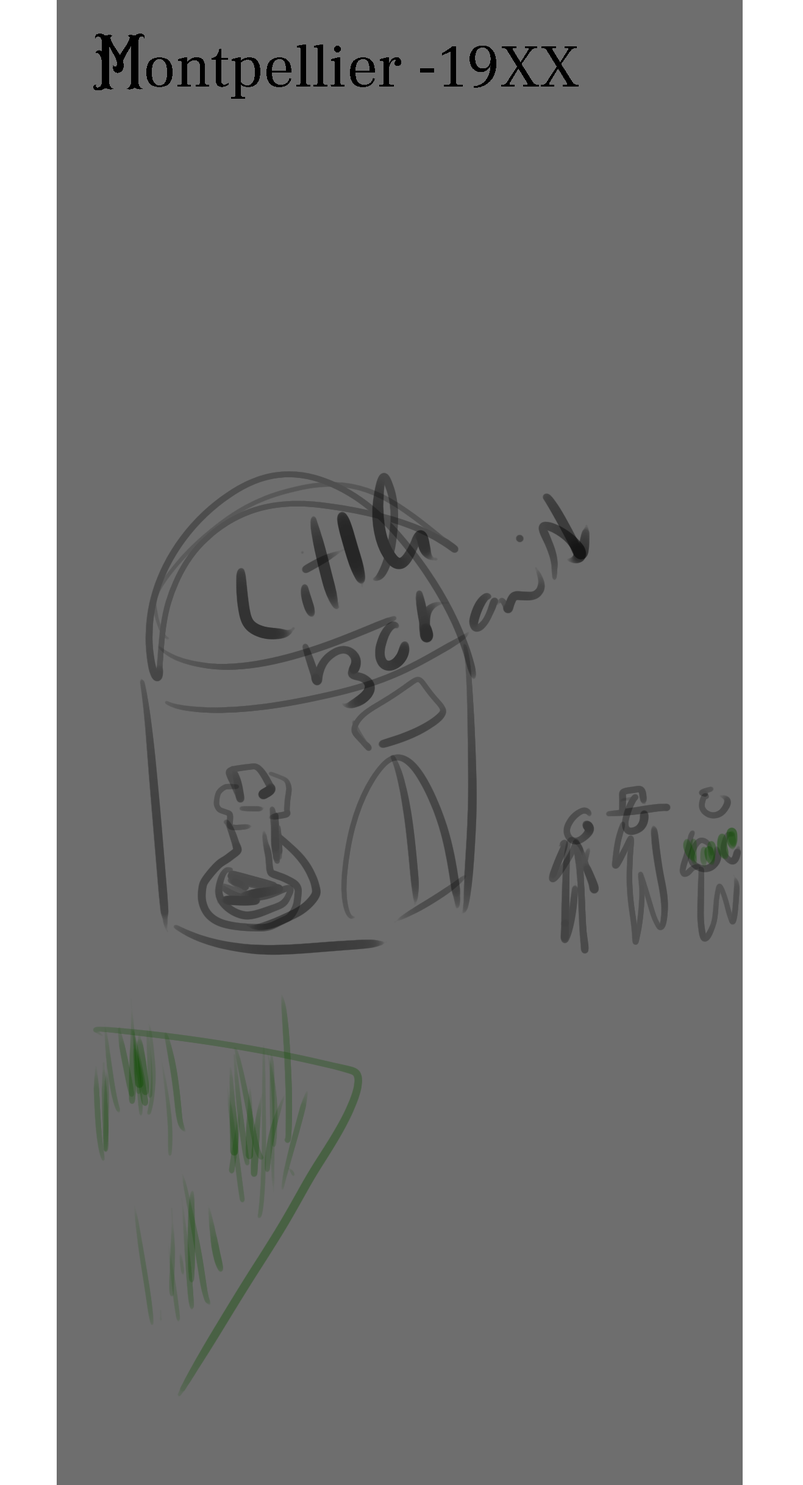
<style>
.page{position:relative;width:803px;height:1485px;background:#6e6e6e}
.page>*{position:absolute;margin:0}
.t1{font:61px "FrankRuhlHofshi-Regular";color:#000000}
.t2{font:73.2px "BisternDemo";color:#000000}
</style>
<div class="page">
<p class="t1" style="left:93px;top:34px;width:486px;height:65px"><span class="t2">M</span>ontpellier -19XX</p>
</div>
